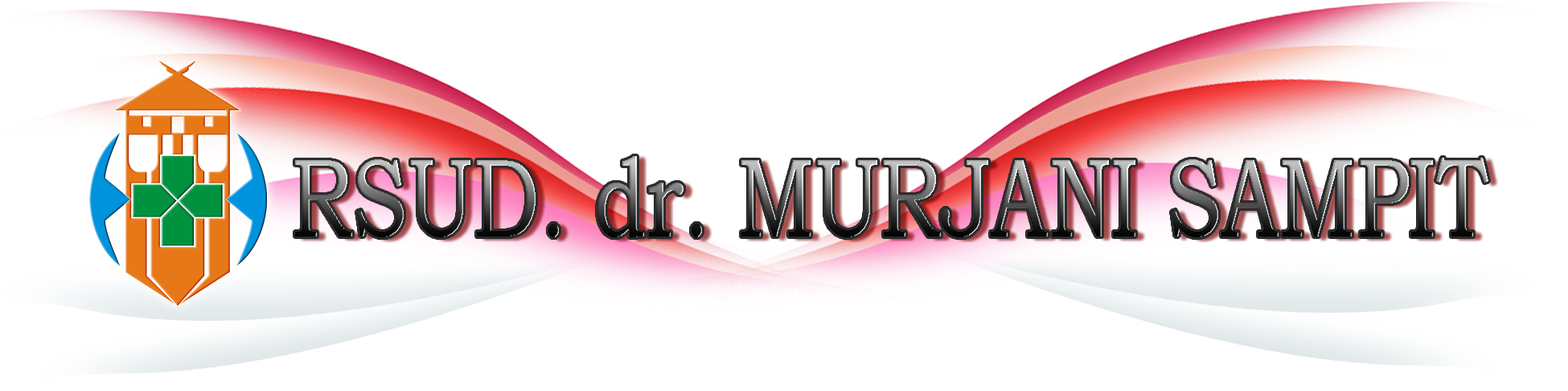
<style>
.page{position:relative;width:1568px;height:391px;background:#ffffff}
.page>*{position:absolute;margin:0}
.t1{font:111.5px "BookmanOldStyle";scale:0.75 1}
</style>
<div class="page">
<p class="t1" style="left:295px;top:156px;width:1193px;height:81px">RSUD. dr. MURJANI SAMPIT</p>
</div>
